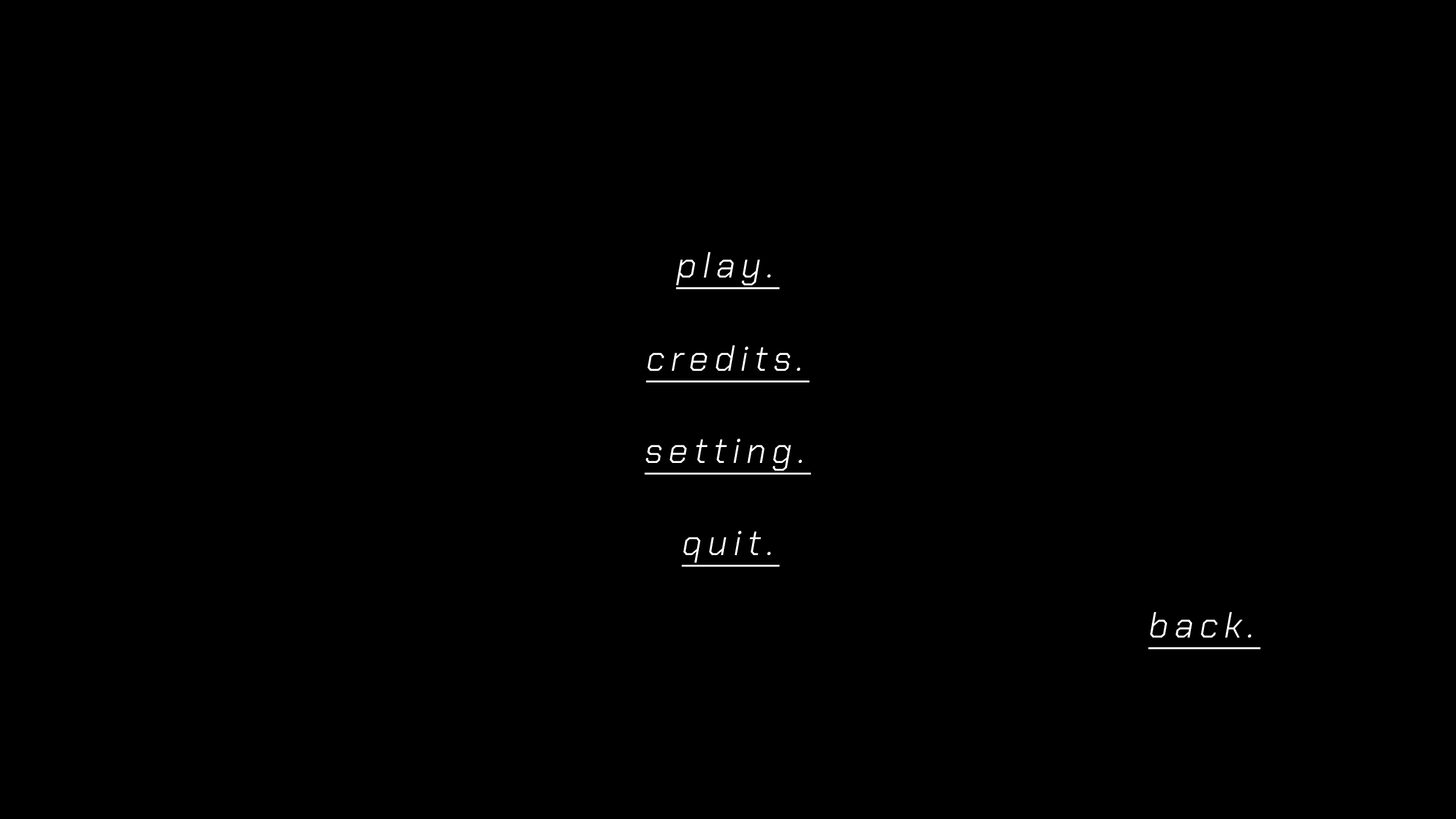
<style>
.page{position:relative;width:1456px;height:819px;background:#000000}
.page>*{position:absolute;margin:0}
.t1{font:35.5px "ChakraPetch-LightItalic";letter-spacing:0.16em;color:#ffffff;text-decoration:underline}
</style>
<div class="page">
<p class="t1" style="left:676px;top:252px;width:104px;height:37px">play.</p>
<p class="t1" style="left:646px;top:345px;width:164px;height:38px">credits.</p>
<p class="t1" style="left:644px;top:439px;width:167px;height:36px">setting.</p>
<p class="t1" style="left:681px;top:531px;width:99px;height:36px">quit.</p>
<p class="t1" style="left:1148px;top:612px;width:113px;height:38px">back.</p>
</div>
